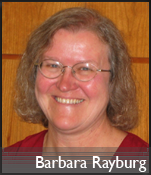
<style>
.page{position:relative;width:151px;height:175px}
.page>*{position:absolute;margin:0}
.t1{font:16.7px "GillSansMT";color:#fffefe}
</style>
<div class="page">
<p class="t1" style="left:36px;top:156px;width:111px;height:16px">Barbara Rayburg</p>
</div>
